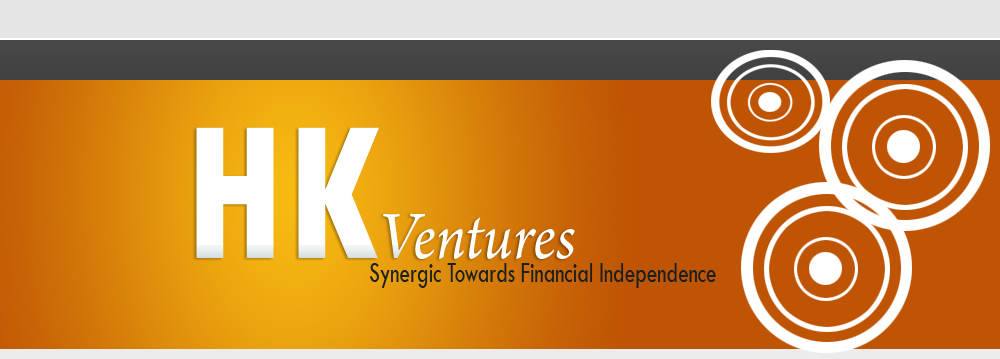
<style>
.page{position:relative;width:1000px;height:359px;background:#bf5404}
.page>*{position:absolute;margin:0}
.t1{font:72px "ArnoPro-Italic";color:#ffffff;scale:0.9 1}
.t2{font:200px "TwCenMT-CondensedExtraBold";color:#ffffff;scale:0.9 1}
.t3{font:30px "TwCenMT-Regular";color:#1a1f21;scale:0.7 1}
</style>
<div class="page">
<p class="t1" style="left:196px;top:127px;width:379px;height:132px"><span class="t2">HK</span>Ventures</p>
<p class="t3" style="left:370px;top:263px;width:346px;height:25px">Synergic Towards Financial Independence</p>
</div>
